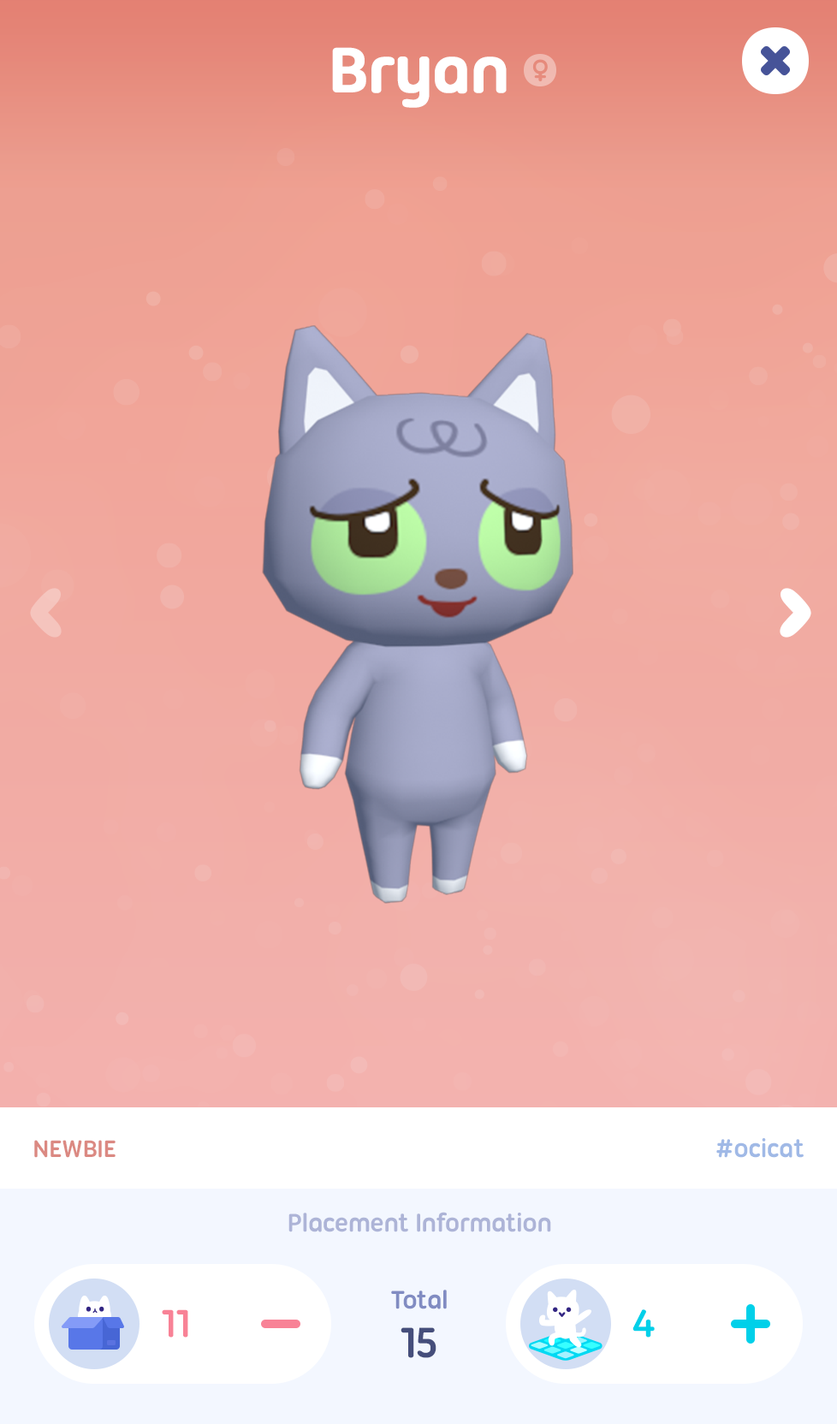
<style>
.page{position:relative;width:837px;height:1424px}
.page>*{position:absolute;margin:0}
.t1{font:68.5px "UbuntuTitling-Bold";letter-spacing:-0.025em;color:#ffffff;font-weight:bold}
.t2{font:25.7px "UbuntuTitling-Bold";letter-spacing:-0.025em;color:#db8982;text-transform:uppercase}
.t3{font:27.4px "UbuntuTitling-Bold";letter-spacing:-0.025em;color:#a0b9e6}
.t4{font:27.4px "UbuntuTitling-Bold";letter-spacing:-0.025em;color:#adb4d7}
.t5{font:27.4px "UbuntuTitling-Bold";letter-spacing:-0.025em;color:#818cc2}
.t6{font:41.7px "UbuntuTitling-Bold";letter-spacing:-0.025em;color:#f88296}
.t7{font:41.7px "UbuntuTitling-Bold";letter-spacing:-0.025em;color:#00d0e9}
.t8{font:46.2px "UbuntuTitling-Bold";letter-spacing:-0.025em;color:#454e7b}
</style>
<div class="page">
<p class="t1" style="left:332px;top:47px;width:175px;height:61px">Bryan</p>
<p class="t2" style="left:34px;top:1140px;width:82px;height:18px">Newbie</p>
<p class="t3" style="left:716px;top:1138px;width:88px;height:20px">#ocicat</p>
<p class="t4" style="left:288px;top:1212px;width:263px;height:21px">Placement Information</p>
<p class="t5" style="left:391px;top:1290px;width:56px;height:20px">Total</p>
<p class="t6" style="left:162px;top:1310px;width:26px;height:28px">11</p>
<p class="t7" style="left:633px;top:1310px;width:22px;height:28px">4</p>
<p class="t8" style="left:401px;top:1328px;width:36px;height:30px">15</p>
</div>
